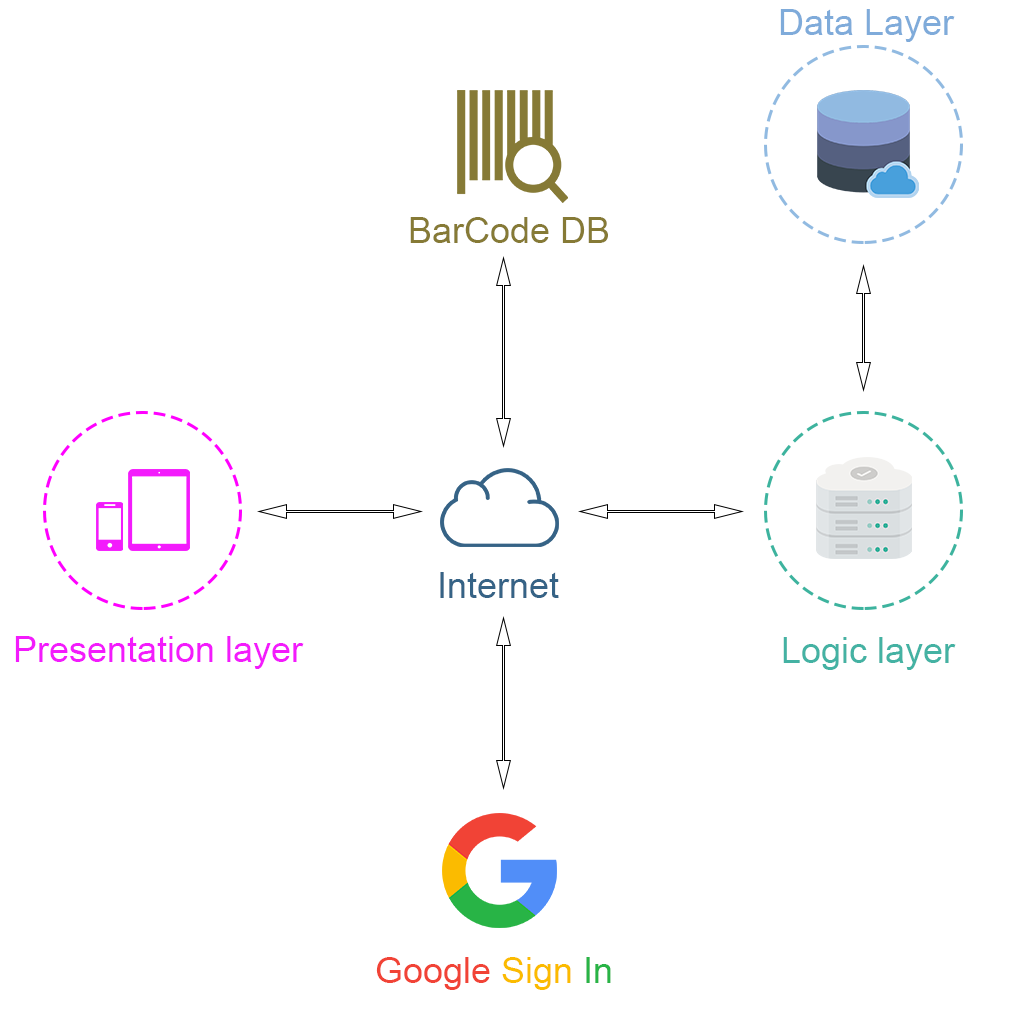
<style>
.page{position:relative;width:1024px;height:1024px;background:#ffffff}
.page>*{position:absolute;margin:0}
.t1{font:36px "ArialMT";color:#7fabda}
.t2{font:36px "ArialMT";color:#867a36}
.t3{font:36px "ArialMT";color:#366386}
.t4{font:36px "ArialMT";color:#f31bfc}
.t5{font:36px "ArialMT";color:#44b2a3}
.t6{font:36px "ArialMT";color:#f14336}
.t7{font:36px "ArialMT";color:#fbbb00}
.t8{font:36px "ArialMT";color:#28b446}
</style>
<div class="page">
<p class="t1" style="left:780px;top:9px;width:175px;height:33px">Data Layer</p>
<p class="t2" style="left:410px;top:217px;width:198px;height:26px">BarCode DB</p>
<p class="t3" style="left:440px;top:572px;width:119px;height:26px">Internet</p>
<p class="t4" style="left:15px;top:636px;width:289px;height:33px">Presentation layer</p>
<p class="t5" style="left:783px;top:637px;width:173px;height:33px">Logic layer</p>
<p class="t6" style="left:376px;top:957px;width:235px;height:33px">Google <span class="t7">Sign </span><span class="t8">In</span></p>
</div>
